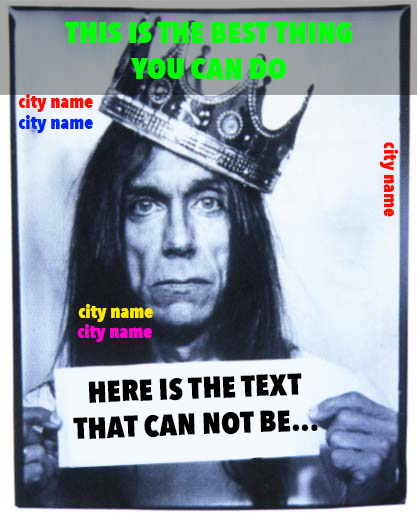
<style>
.page{position:relative;width:417px;height:517px}
.page>*{position:absolute;margin:0}
.t1{font:30px "AvenirNextCondensed-Heavy";color:#00ff06}
.t2{font:18px "AvenirNextCondensed-Heavy";color:#ff0c00}
.t3{font:18px "AvenirNextCondensed-Heavy";color:#0024ff}
.t4{font:18px "AvenirNextCondensed-Heavy";color:#ffea00}
.t5{font:18px "AvenirNextCondensed-Heavy";color:#ff00d2}
.t6{font:30px "AvenirNextCondensed-Heavy";color:#000000}
</style>
<div class="page">
<p class="t1" style="left:65px;top:22px;width:287px;height:57px;text-align:center">THIS IS THE BEST THING <br>YOU CAN DO</p>
<p class="t2" style="left:18px;top:94px;width:75px;height:18px">city name</p>
<p class="t3" style="left:18px;top:115px;width:75px;height:18px">city name</p>
<p class="t2" style="left:379px;top:142px;width:20px;height:75px;rotate:90deg">city name</p>
<p class="t4" style="left:78px;top:304px;width:75px;height:18px">city name</p>
<p class="t5" style="left:77px;top:324px;width:75px;height:18px">city name</p>
<p class="t6" style="left:73px;top:373px;width:245px;height:66px;rotate:-2deg">HERE IS THE TEXT THAT CAN NOT BE...</p>
</div>
